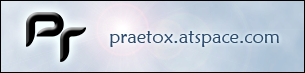
<style>
.page{position:relative;width:305px;height:73px}
.page>*{position:absolute;margin:0}
.t1{font:19px "MaiandraGD-Regular";color:#3c547e}
</style>
<div class="page">
<p class="t1" style="left:110px;top:31px;width:169px;height:16px">praetox.atspace.com</p>
</div>
